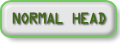
<style>
.page{position:relative;width:120px;height:45px;background:#e6e6e6}
.page>*{position:absolute;margin:0}
.t1{font:14px "OCRAStd";letter-spacing:-0.12em;color:#42681a}
</style>
<div class="page">
<p class="t1" style="left:12px;top:12px;width:94px;height:12px">NORMAL HEAD</p>
</div>
